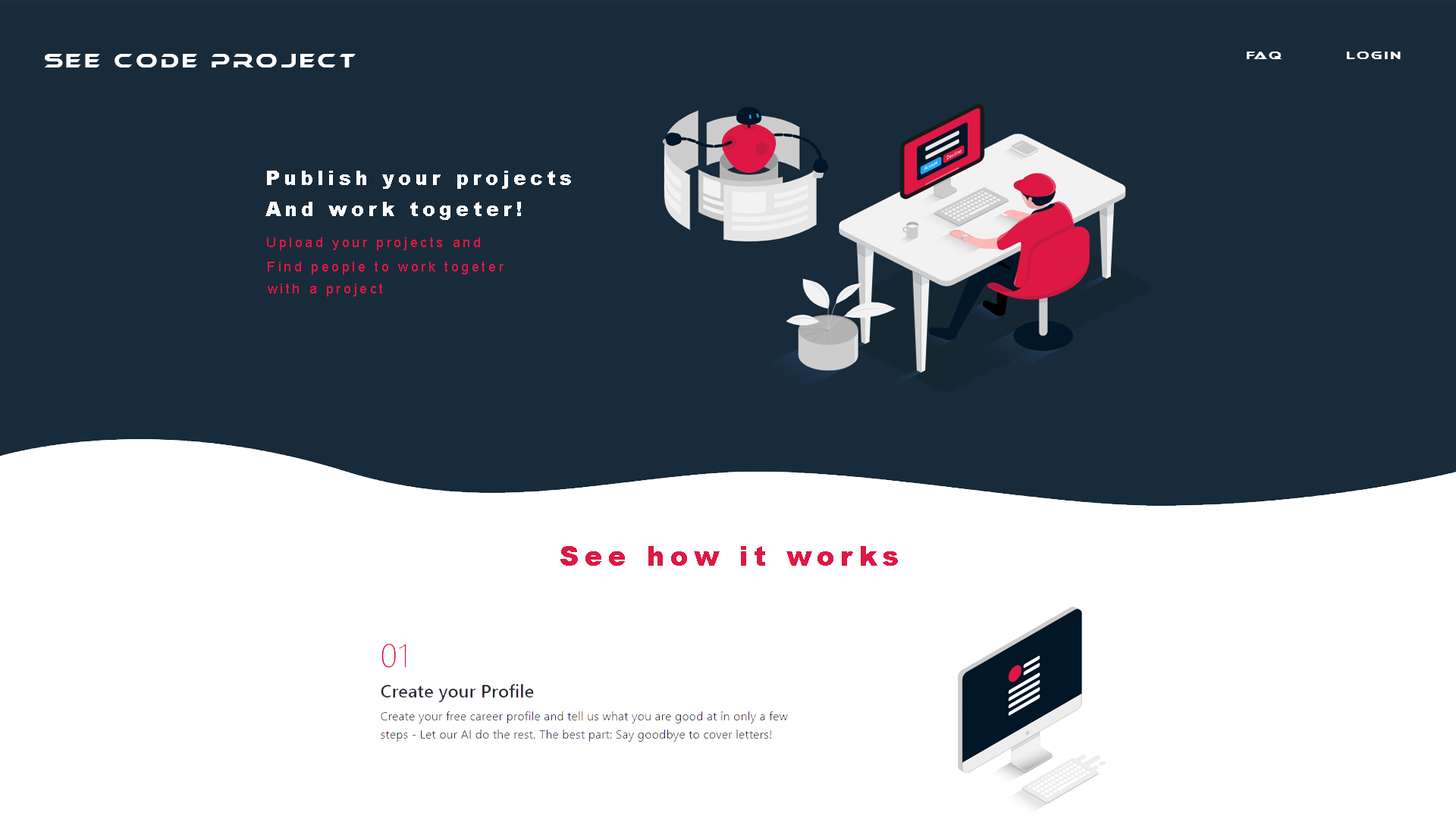
<style>
.page{position:relative;width:1456px;height:819px;background:#182b3a}
.page>*{position:absolute;margin:0}
.t1{font:18.2px "Ethnocentric";letter-spacing:0.2em;color:#ffffff}
.t2{font:10.6px "Ethnocentric";letter-spacing:0.2em;color:#ffffff}
.t3{font:19.7px "Arial-Black";letter-spacing:0.2em;color:#ffffff}
.t4{font:13.6px "ArialMT";letter-spacing:0.2em;color:#dd1843}
.t5{font:27.3px "Arial-Black";letter-spacing:0.2em;color:#dd1843}
</style>
<div class="page">
<p class="t1" style="left:45px;top:54px;width:311px;height:13px">See code project</p>
<p class="t2" style="left:1247px;top:52px;width:35px;height:7px">Faq</p>
<p class="t2" style="left:1347px;top:52px;width:54px;height:7px">Login</p>
<p class="t3" style="left:267px;top:171px;width:304px;height:18px">Publish your projects</p>
<p class="t3" style="left:265px;top:202px;width:256px;height:18px">And work togeter!</p>
<p class="t4" style="left:267px;top:237px;width:213px;height:13px">Upload your projects and</p>
<p class="t4" style="left:268px;top:262px;width:236px;height:13px">Find people to work togeter</p>
<p class="t4" style="left:268px;top:284px;width:114px;height:13px">with a project</p>
<p class="t5" style="left:560px;top:546px;width:338px;height:20px">See how it works</p>
</div>
